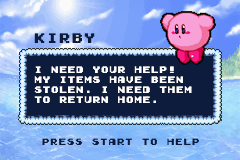
<style>
.page{position:relative;width:240px;height:160px;background:#0d1b3d}
.page>*{position:absolute;margin:0}
.t1{font:12.5px "GamegirlClassic";color:#0d1b3d}
.t2{font:8.3px "GamegirlClassic";color:#ffffff}
.t3{font:8.3px "GamegirlClassic";color:#0d1b3d}
</style>
<div class="page">
<p class="t1" style="left:34px;top:33px;width:61px;height:10px">kirby</p>
<p class="t2" style="left:34px;top:66px;width:158px;height:37px">I NEED YOUR HELP!<br>MY ITEMS HAVE BEEN<br>STOLEN. i need them<br>to return home.</p>
<p class="t3" style="left:42px;top:138px;width:157px;height:7px">PRESS START TO HELP</p>
</div>
